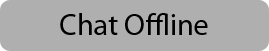
<style>
.page{position:relative;width:269px;height:51px;background:#afafaf}
.page>*{position:absolute;margin:0}
.t1{font:30px "MyriadPro-Regular";color:#000000}
</style>
<div class="page">
<p class="t1" style="left:60px;top:13px;width:148px;height:22px">Chat Offline</p>
</div>
